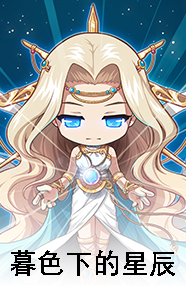
<style>
.page{position:relative;width:186px;height:286px}
.page>*{position:absolute;margin:0}
.t1{font:28px "DengXian-Bold";color:#000000}
</style>
<div class="page">
<p class="t1" style="left:11px;top:250px;width:164px;height:26px">暮色下的星辰</p>
</div>
